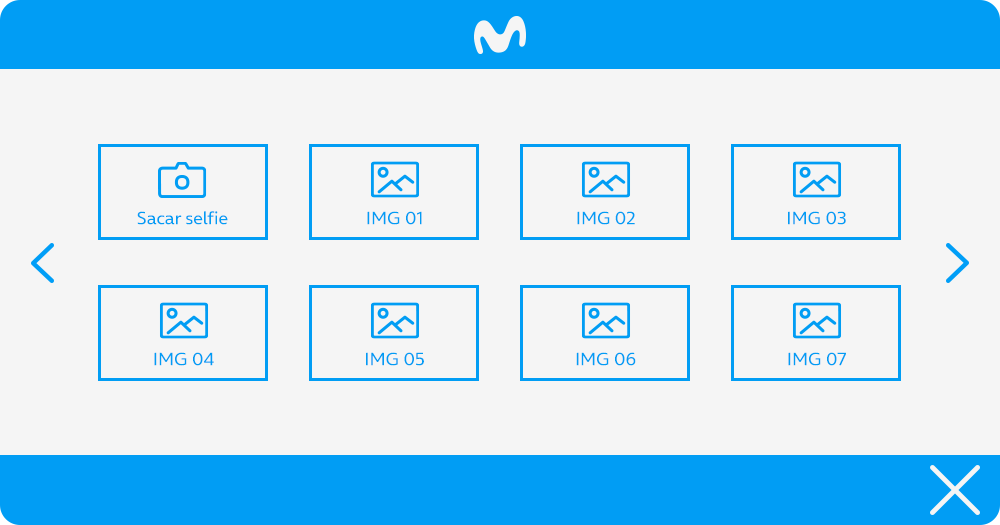
<style>
.page{position:relative;width:1000px;height:525px;background:#f5f5f5}
.page>*{position:absolute;margin:0}
.t1{font:18px "OnAir-Regular";color:#019df4}
</style>
<div class="page">
<p class="t1" style="left:137px;top:211px;width:91px;height:14px">Sacar selfie</p>
<p class="t1" style="left:367px;top:211px;width:55px;height:14px">IMG 01</p>
<p class="t1" style="left:577px;top:211px;width:58px;height:14px">IMG 02</p>
<p class="t1" style="left:788px;top:211px;width:58px;height:14px">IMG 03</p>
<p class="t1" style="left:154px;top:352px;width:60px;height:14px">IMG 04</p>
<p class="t1" style="left:366px;top:352px;width:58px;height:14px">IMG 05</p>
<p class="t1" style="left:576px;top:352px;width:60px;height:14px">IMG 06</p>
<p class="t1" style="left:788px;top:352px;width:58px;height:14px">IMG 07</p>
</div>
